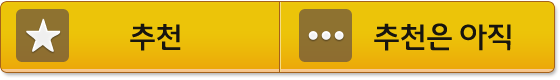
<style>
.page{position:relative;width:560px;height:80px;background:#ecc409}
.page>*{position:absolute;margin:0}
.t1{font:28px "Daum_Regular";letter-spacing:-0.025em;color:#17150f;scale:0.97 1}
</style>
<div class="page">
<p class="t1" style="left:130px;top:23px;width:51px;height:28px">추천</p>
<p class="t1" style="left:374px;top:23px;width:137px;height:28px">추천은 아직</p>
</div>
